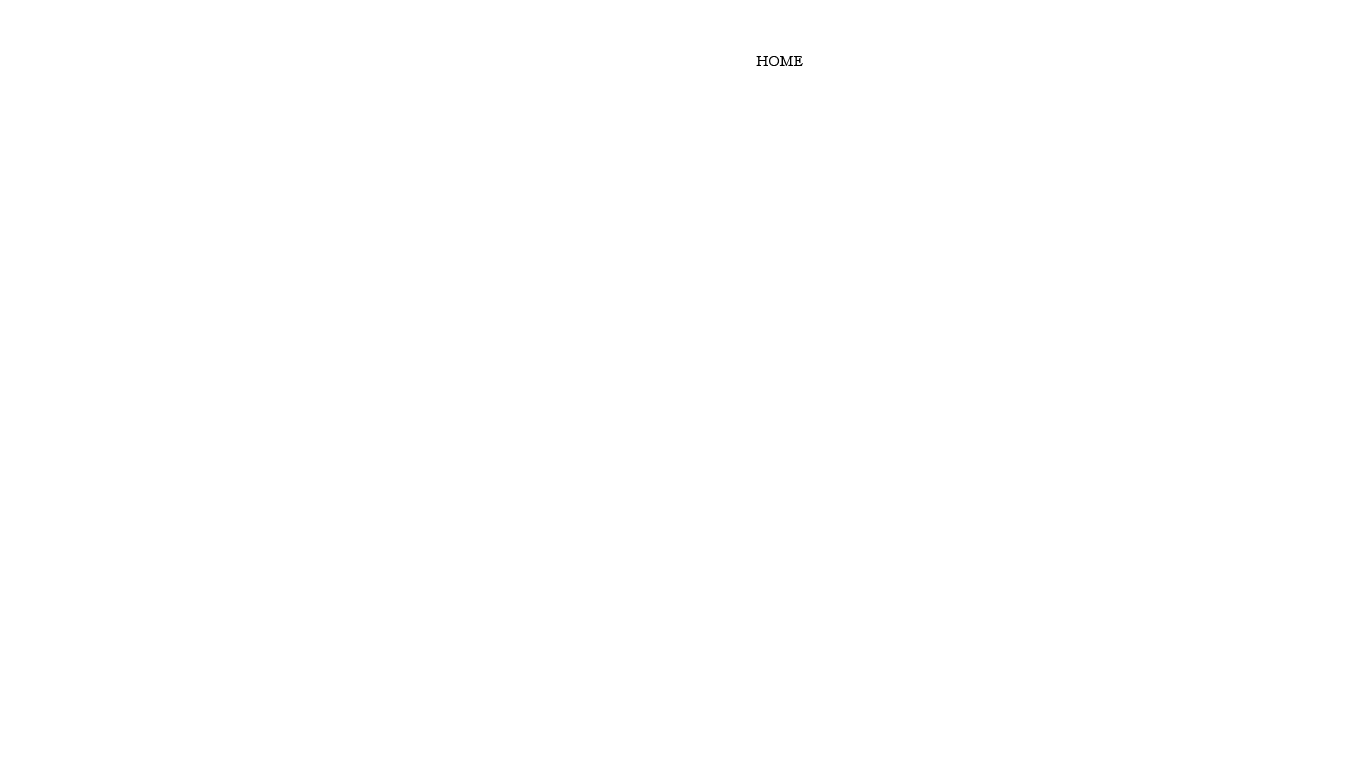
<style>
.page{position:relative;width:1366px;height:768px;background:#ffffff}
.page>*{position:absolute;margin:0}
.t1{font:14px "HoeflerText-Regular";color:#000000}
</style>
<div class="page">
<p class="t1" style="left:756px;top:56px;width:47px;height:10px">HOME</p>
</div>
